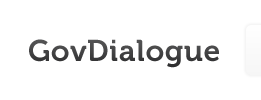
<style>
.page{position:relative;width:261px;height:100px;background:#ffffff}
.page>*{position:absolute;margin:0}
.t1{font:30px "Museo-700";letter-spacing:0.02em;color:#353536}
</style>
<div class="page">
<p class="t1" style="left:29px;top:39px;width:190px;height:29px">GovDialogue</p>
</div>
